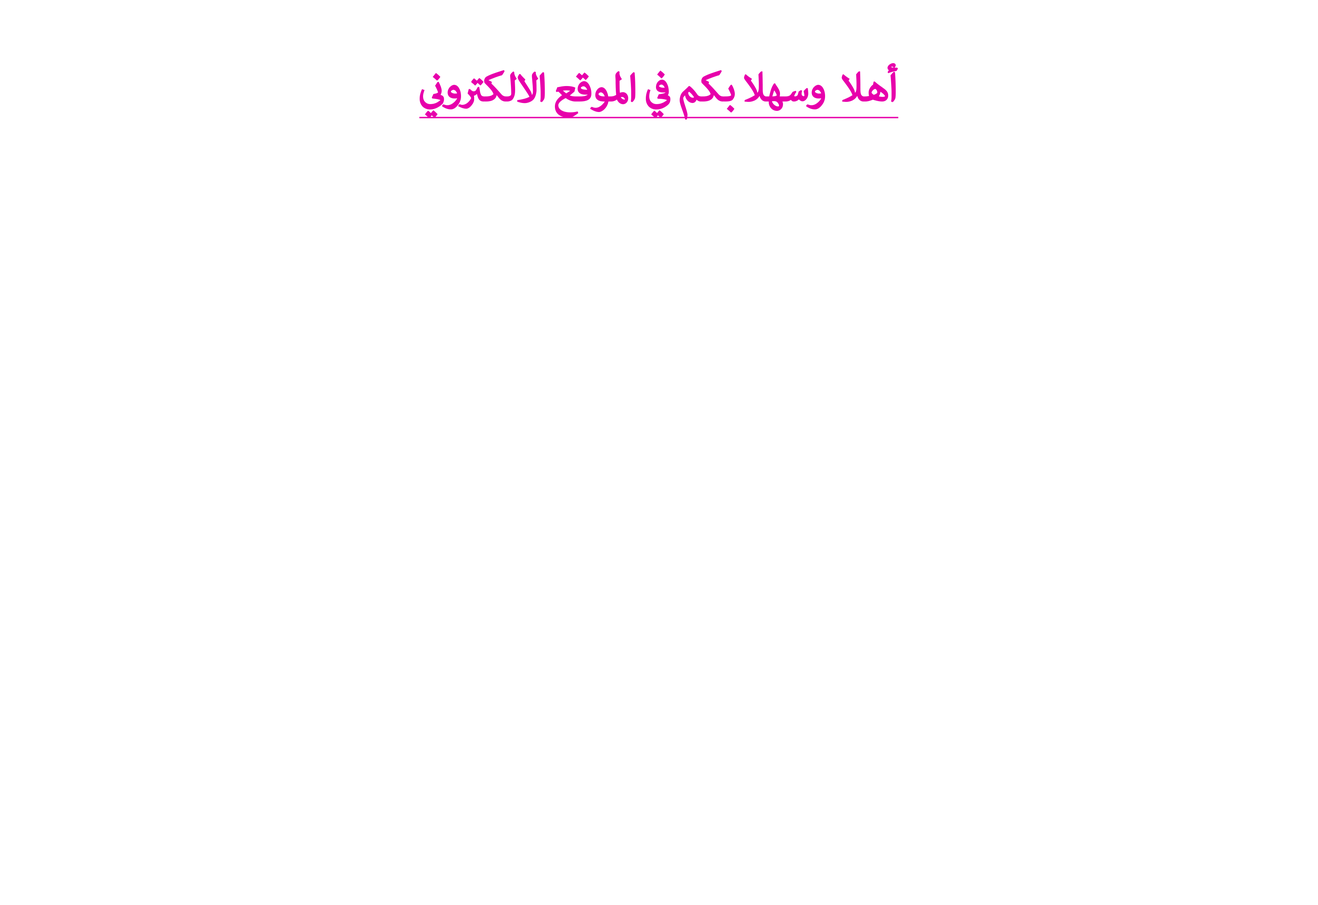
<style>
.page{position:relative;width:1318px;height:905px;background:#ffffff}
.page>*{position:absolute;margin:0}
.t1{font:56.4px "AdobeArabic-Regular";letter-spacing:-0.03em;color:#e700ab;font-weight:bold;text-decoration:underline}
</style>
<div class="page">
<p class="t1" style="left:419px;top:63px;width:479px;height:57px">أهلا  وسهلا بكم في الموقع الالكتروني</p>
</div>
